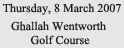
<style>
.page{position:relative;width:124px;height:48px;background:#e6e6e6}
.page>*{position:absolute;margin:0}
.t1{font:12px "TimesNewRomanPSMT";color:#221e1f}
.t2{font:12px/14px "TimesNewRomanPSMT";color:#221e1f}
</style>
<div class="page">
<p class="t1" style="left:3px;top:3px;width:118px;height:12px">Thursday, 8 March 2007</p>
<p class="t2" style="left:11px;top:21px;width:95px;height:24px;text-align:center">Ghallah Wentworth <br>Golf Course</p>
</div>
